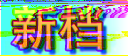
<style>
.page{position:relative;width:128px;height:56px}
.page>*{position:absolute;margin:0}
.t1{font:48px "AdobeHeitiStd-Regular"}
</style>
<div class="page">
<p class="t1" style="left:12px;top:5px;width:91px;height:44px">新档</p>
</div>
